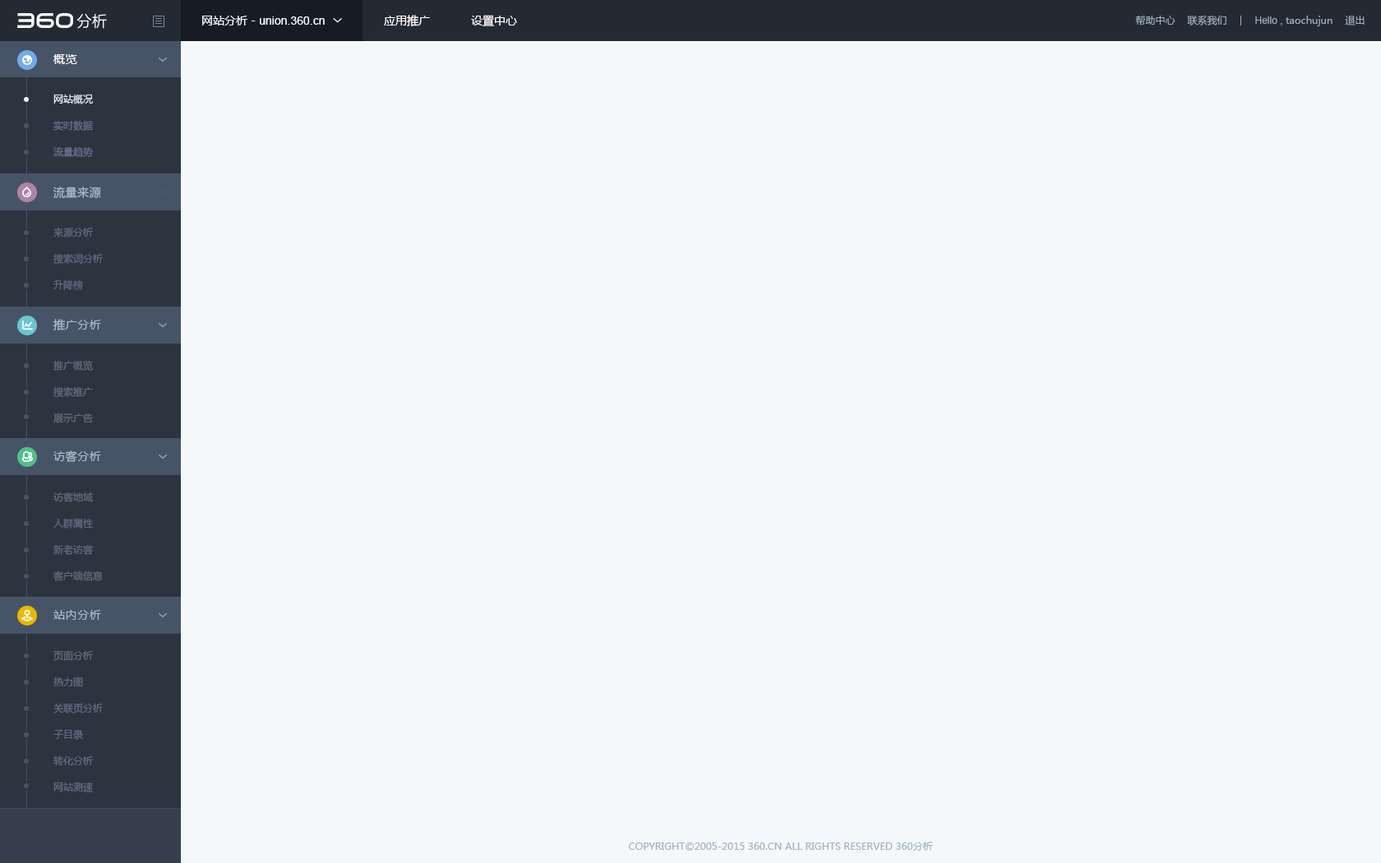
<style>
.page{position:relative;width:1381px;height:863px;background:#f5f8fb}
.page>*{position:absolute;margin:0}
.t1{font:14.8px "MicrosoftYaHei";letter-spacing:0.02em;color:#ffffff}
.t2{font:11.5px "ArialMT";color:#f5f8fb}
.t3{font:11.5px "MicrosoftYaHei";color:#f5f8fb}
.t4{font:11.5px "MicrosoftYaHei";color:#ffffff}
.t5{font:9.9px "MicrosoftYaHei";color:#a3b1bf}
.t6{font:9.9px "ArialMT";color:#a3b1bf}
.t7{font:11.5px "MicrosoftYaHei";letter-spacing:0.04em;color:#ffffff}
.t8{font:9.9px/26.3px "MicrosoftYaHei";color:#66728c}
.t9{font:9.9px/26.3px "MicrosoftYaHei";color:#e9eff5}
.t10{font:11.5px "MicrosoftYaHei";letter-spacing:0.04em;color:#adbdcc}
.t11{font:9.9px/26.3px "MicrosoftYaHei";color:#606d80}
.t12{font:9.9px "MicrosoftYaHei";color:#a1b1be;text-transform:uppercase}
</style>
<div class="page">
<p class="t1" style="left:76px;top:13px;width:31px;height:16px">分析</p>
<p class="t2" style="left:202px;top:16px;width:123px;height:9px"><span class="t3">网站分析 - </span>union.360.cn</p>
<p class="t4" style="left:384px;top:15px;width:46px;height:12px">应用推广</p>
<p class="t4" style="left:471px;top:15px;width:46px;height:11px">设置中心</p>
<p class="t5" style="left:1135px;top:15px;width:41px;height:10px">帮助中心</p>
<p class="t5" style="left:1187px;top:16px;width:40px;height:9px">联系我们</p>
<p class="t5" style="left:1255px;top:16px;width:78px;height:10px"><span class="t6">Hello , </span>taochujun</p>
<p class="t5" style="left:1345px;top:16px;width:20px;height:9px">退出</p>
<p class="t7" style="left:53px;top:54px;width:24px;height:10px">概览</p>
<p class="t8" style="left:53px;top:94px;width:40px;height:63px"><span class="t9">网站概况<br></span>实时数据<br>流量趋势<br>搜索关键词<br>升降榜</p>
<p class="t10" style="left:53px;top:187px;width:48px;height:12px">流量来源</p>
<p class="t11" style="left:53px;top:227px;width:50px;height:63px">来源分析<br>搜索词分析<br>升降榜</p>
<p class="t10" style="left:53px;top:319px;width:48px;height:12px">推广分析</p>
<p class="t11" style="left:53px;top:360px;width:41px;height:63px">推广概览<br>搜索推广<br>展示广告</p>
<p class="t10" style="left:53px;top:451px;width:48px;height:11px">访客分析</p>
<p class="t11" style="left:53px;top:492px;width:50px;height:89px">访客地域<br>人群属性<br>新老访客<br>客户端信息</p>
<p class="t10" style="left:53px;top:610px;width:48px;height:10px">站内分析</p>
<p class="t11" style="left:53px;top:651px;width:50px;height:142px">页面分析<br>热力图<br>关联页分析<br>子目录<br>转化分析<br>网站测速</p>
<p class="t12" style="left:629px;top:842px;width:304px;height:9px">Copyright©2005-2015 360.CN All Rights Reserved 360分析</p>
</div>
